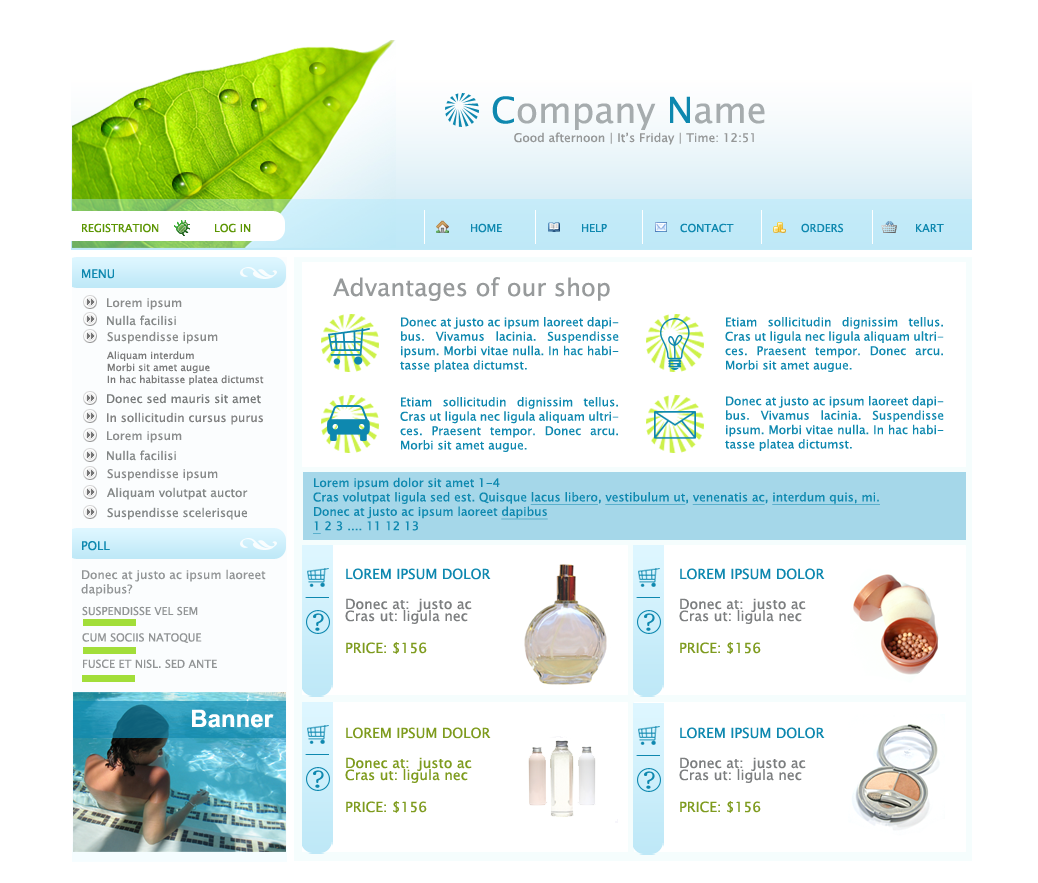
<style>
.page{position:relative;width:1038px;height:883px;background:#ffffff}
.page>*{position:absolute;margin:0}
.t1{font:36px "LucidaSansUnicode";color:#a6acae}
.t2{font:36px "LucidaSansUnicode";color:#0e88af}
.t3{font:12px "LucidaSansUnicode";color:#959797}
.t4{font:11px "LucidaSansUnicode";color:#5b9502;text-transform:uppercase}
.t5{font:11px "LucidaSansUnicode";color:#0e88af;text-transform:uppercase}
.t6{font:12px "LucidaSansUnicode";color:#0e88af}
.t7{font:24px "LucidaSansUnicode";color:#979a9b}
.t8{font:12px "LucidaSansUnicode";color:#898b8b}
.t9{font:12px "LucidaSansUnicode";color:#838787}
.t10{font:10px "LucidaSansUnicode";color:#797979}
.t11{font:12px "LucidaSansUnicode";color:#787b7b}
.t12{font:12px "LucidaSansUnicode";color:#818181}
.t13{font:12px "LucidaSansUnicode";color:#0e88af;text-decoration:underline}
.t14{font:12px "LucidaSansUnicode";color:#0e88af;text-transform:uppercase}
.t15{font:12px "LucidaSansUnicode";color:#929596}
.t16{font:14px/12px "LucidaSansUnicode";color:#7c7e7f}
.t17{font:14px/24px "LucidaSansUnicode";color:#0e88af;text-transform:uppercase}
.t18{font:14px/14px "LucidaSansUnicode";color:#7e9b1e;text-transform:uppercase}
.t19{font:11px "LucidaSansUnicode";color:#929596;text-transform:uppercase}
.t20{font:24px "Arial-BoldMT";color:#ffffff}
.t21{font:14px/12px "LucidaSansUnicode";color:#7e9b1e}
.t22{font:14px/24px "LucidaSansUnicode";color:#7e9b1e;text-transform:uppercase}
</style>
<div class="page">
<p class="t1" style="left:492px;top:96px;width:273px;height:34px"><span class="t2">C</span>ompany<span class="t2"> N</span>ame</p>
<p class="t3" style="left:514px;top:132px;width:240px;height:13px">Good afternoon | It’s Friday | Time: 12:51</p>
<p class="t4" style="left:82px;top:223px;width:77px;height:10px">registration</p>
<p class="t4" style="left:215px;top:223px;width:36px;height:10px">log in</p>
<p class="t5" style="left:471px;top:223px;width:31px;height:10px">home</p>
<p class="t5" style="left:582px;top:224px;width:25px;height:8px">help</p>
<p class="t5" style="left:680px;top:223px;width:54px;height:10px">contact</p>
<p class="t5" style="left:801px;top:223px;width:43px;height:10px">orders</p>
<p class="t5" style="left:916px;top:224px;width:28px;height:8px">kart</p>
<p class="t6" style="left:82px;top:269px;width:32px;height:10px">MENU</p>
<p class="t7" style="left:333px;top:277px;width:277px;height:24px">Advantages of our shop</p>
<p class="t8" style="left:107px;top:298px;width:75px;height:12px">Lorem ipsum</p>
<p class="t9" style="left:107px;top:315px;width:69px;height:11px">Nulla facilisi</p>
<p class="t6" style="left:400px;top:317px;width:219px;height:55px;text-align:justify">Donec at justo ac ipsum laoreet dapibus. Vivamus lacinia. Suspendisse ipsum. Morbi vitae nulla. In hac habitasse platea dictumst.</p>
<p class="t6" style="left:725px;top:317px;width:219px;height:55px;text-align:justify">Etiam sollicitudin dignissim tellus. Cras ut ligula nec ligula aliquam ultrices. Praesent tempor. Donec arcu. Morbi sit amet augue.</p>
<p class="t8" style="left:107px;top:331px;width:111px;height:13px">Suspendisse ipsum</p>
<p class="t10" style="left:107px;top:351px;width:157px;height:34px">Aliquam interdum<br>Morbi sit amet augue<br>In hac habitasse platea dictumst</p>
<p class="t11" style="left:107px;top:393px;width:154px;height:11px">Donec sed mauris sit amet</p>
<p class="t6" style="left:400px;top:397px;width:219px;height:55px;text-align:justify">Etiam sollicitudin dignissim tellus. Cras ut ligula nec ligula aliquam ultrices. Praesent tempor. Donec arcu. Morbi sit amet augue.</p>
<p class="t6" style="left:725px;top:396px;width:219px;height:55px;text-align:justify">Donec at justo ac ipsum laoreet dapibus. Vivamus lacinia. Suspendisse ipsum. Morbi vitae nulla. In hac habitasse platea dictumst.</p>
<p class="t12" style="left:107px;top:412px;width:156px;height:13px">In sollicitudin cursus purus</p>
<p class="t8" style="left:107px;top:431px;width:75px;height:12px">Lorem ipsum</p>
<p class="t9" style="left:107px;top:450px;width:69px;height:11px">Nulla facilisi</p>
<p class="t8" style="left:107px;top:468px;width:111px;height:13px">Suspendisse ipsum</p>
<p class="t6" style="left:313px;top:477px;width:567px;height:57px">Lorem ipsum dolor sit amet 1-4<br>Cras volutpat ligula sed est. Quisque <span class="t13">lacus libero</span>, <span class="t13">vestibulum ut</span>, <span class="t13">venenatis ac</span>, <span class="t13">interdum quis, mi.<br></span>Donec at justo ac ipsum laoreet <span class="t13">dapibus <br>1</span> 2 3 .... 11 12 13</p>
<p class="t9" style="left:107px;top:487px;width:141px;height:13px">Aliquam volutpat auctor</p>
<p class="t9" style="left:107px;top:507px;width:140px;height:13px">Suspendisse scelerisque</p>
<p class="t14" style="left:82px;top:541px;width:28px;height:10px">poll</p>
<p class="t15" style="left:81px;top:569px;width:185px;height:27px">Donec at justo ac ipsum laoreet<br>dapibus?</p>
<p class="t16" style="left:345px;top:568px;width:146px;height:86px"><span class="t17">Lorem ipsum dolor <br><br></span>Donec at:  justo ac<br>Cras ut: ligula nec<br><br><span class="t18">price: $156</span></p>
<p class="t16" style="left:679px;top:568px;width:146px;height:86px"><span class="t17">Lorem ipsum dolor <br><br></span>Donec at:  justo ac<br>Cras ut: ligula nec<br><br><span class="t18">price: $156</span></p>
<p class="t19" style="left:82px;top:606px;width:135px;height:62px">Suspendisse vel sem<br><br>Cum sociis natoque<br><br>Fusce et nisl. Sed ante</p>
<p class="t20" style="left:192px;top:709px;width:82px;height:19px">Banner</p>
<p class="t21" style="left:345px;top:727px;width:146px;height:86px"><span class="t22">Lorem ipsum dolor <br><br></span>Donec at:  justo ac<br>Cras ut: ligula nec<br><br><span class="t18">price: $156</span></p>
<p class="t16" style="left:679px;top:727px;width:146px;height:86px"><span class="t17">Lorem ipsum dolor <br><br></span>Donec at:  justo ac<br>Cras ut: ligula nec<br><br><span class="t18">price: $156</span></p>
</div>
